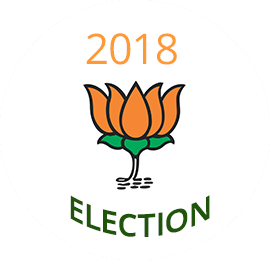
<style>
.page{position:relative;width:270px;height:260px;background:#ffffff}
.page>*{position:absolute;margin:0}
.t1{font:42.3px "OpenSans";letter-spacing:-0.02em;color:#ff9933}
.t2{font:31.4px "OpenSans-Semibold";letter-spacing:-0.02em;color:#1e5508;text-transform:uppercase}
</style>
<div class="page">
<p class="t1" style="left:86px;top:33px;width:91px;height:32px">2018</p>
<p class="t2" style="left:70px;top:195px;width:140px;height:42px">election</p>
</div>
